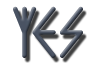
<style>
.page{position:relative;width:100px;height:64px;background:#ffffff}
.page>*{position:absolute;margin:0}
.t1{font:64px "ComicRunes";color:#4a5363}
</style>
<div class="page">
<p class="t1" style="left:13px;top:6px;width:70px;height:52px">YES</p>
</div>
